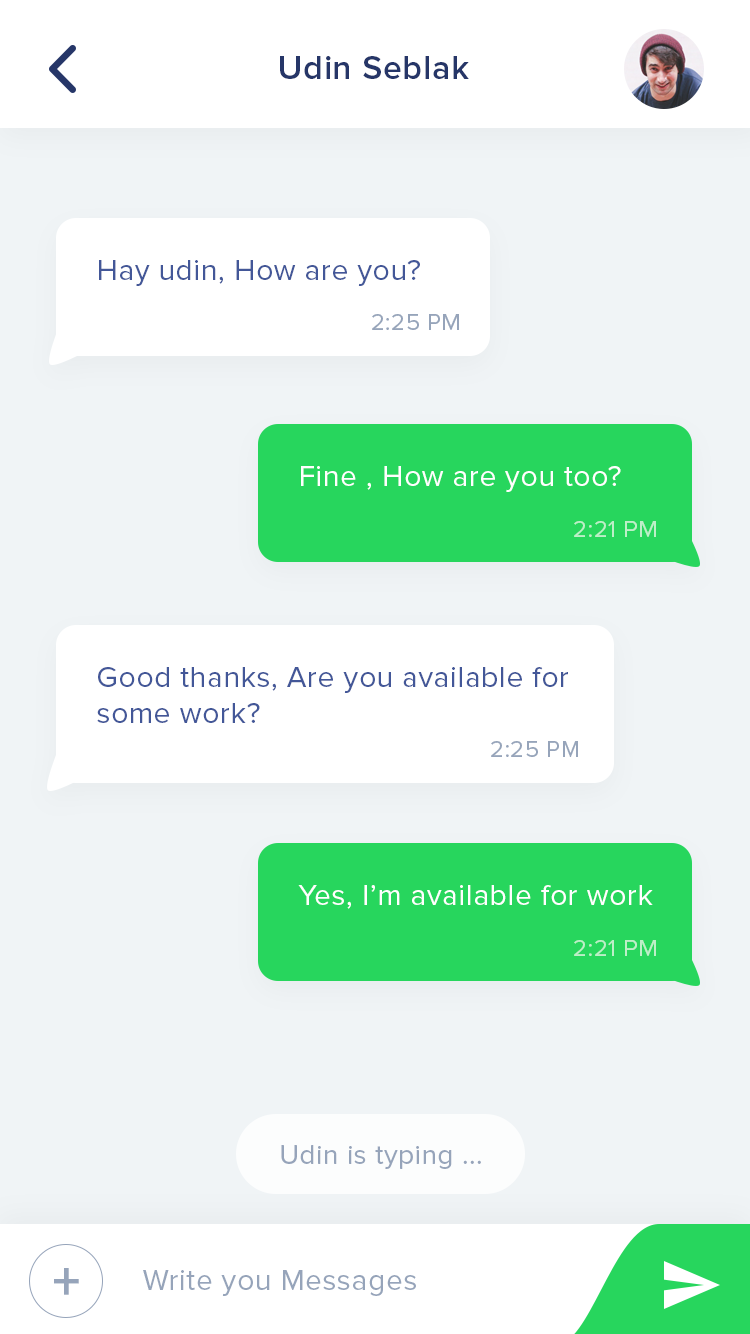
<style>
.page{position:relative;width:750px;height:1334px;background:#f0f4f6}
.page>*{position:absolute;margin:0}
.t1{font:34px "ProximaNova-Semibold";letter-spacing:0.02em;color:#263668}
.t2{font:30px "ProximaNova-Regular";letter-spacing:0.02em;color:#435798}
.t3{font:24px "ProximaNova-Regular";letter-spacing:0.02em;color:#96a4ba}
.t4{font:30px "ProximaNova-Regular";letter-spacing:0.02em;color:#ffffff}
.t5{font:24px "ProximaNova-Regular";letter-spacing:0.02em;color:#bdefc8}
.t6{font:28px "ProximaNova-Regular";letter-spacing:0.02em;color:#96a4ba}
.t7{font:56px "ProximaNova-Bold";letter-spacing:0.02em;color:#96a4ba}
.t8{font:30px "ProximaNova-Regular";letter-spacing:0.02em;color:#96a4ba}
</style>
<div class="page">
<p class="t1" style="left:280px;top:56px;width:189px;height:23px">Udin Seblak</p>
<p class="t2" style="left:99px;top:260px;width:321px;height:26px">Hay udin, How are you?</p>
<p class="t3" style="left:372px;top:314px;width:87px;height:16px">2:25 PM</p>
<p class="t4" style="left:301px;top:466px;width:320px;height:26px">Fine , How are you too?</p>
<p class="t5" style="left:574px;top:521px;width:82px;height:16px">2:21 PM</p>
<p class="t2" style="left:97px;top:667px;width:471px;height:56px">Good thanks, Are you available for<br>some work?</p>
<p class="t3" style="left:491px;top:741px;width:87px;height:16px">2:25 PM</p>
<p class="t4" style="left:298px;top:885px;width:355px;height:24px">Yes, I’m available for work</p>
<p class="t5" style="left:574px;top:940px;width:82px;height:16px">2:21 PM</p>
<p class="t6" style="left:281px;top:1145px;width:200px;height:24px">Udin is typing ...</p>
<p class="t7" style="left:54px;top:1268px;width:25px;height:27px">+</p>
<p class="t8" style="left:143px;top:1270px;width:273px;height:26px">Write you Messages</p>
</div>
